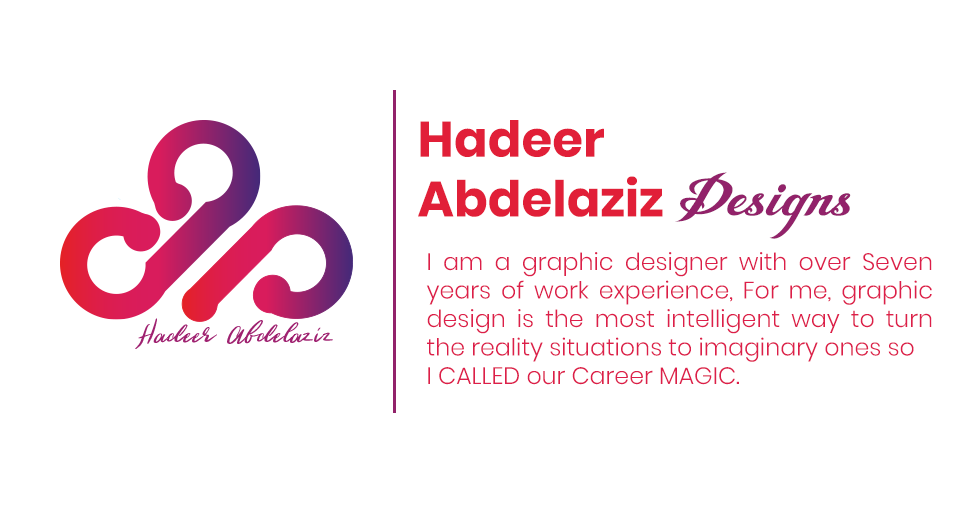
<style>
.page{position:relative;width:971px;height:509px;background:#ffffff}
.page>*{position:absolute;margin:0}
.t1{font:49.8px "Poppins-Bold";color:#e11f38}
.t2{font:68.2px "AngelTearsNeuePersonalUs-Regula";color:#92226a}
.t3{font:23.7px "Poppins-Light";color:#dd1e4a}
</style>
<div class="page">
<p class="t1" style="left:418px;top:120px;width:245px;height:97px;text-align:justify">Hadeer <br>Abdelaziz</p>
<p class="t2" style="left:675px;top:172px;width:176px;height:67px">Designs</p>
<p class="t3" style="left:426px;top:252px;width:506px;height:133px;text-align:justify">I am a graphic designer with over Seven years of work experience, For me, graphic design is the most intelligent way to turn the reality situations to imaginary ones so <br>I CALLED our Career MAGIC.</p>
</div>
